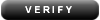
<style>
.page{position:relative;width:100px;height:20px}
.page>*{position:absolute;margin:0}
.t1{font:9.3px "Arial-BoldMT";color:#ffffff}
</style>
<div class="page">
<p class="t1" style="left:25px;top:6px;width:47px;height:7px">V E R I F Y</p>
</div>
